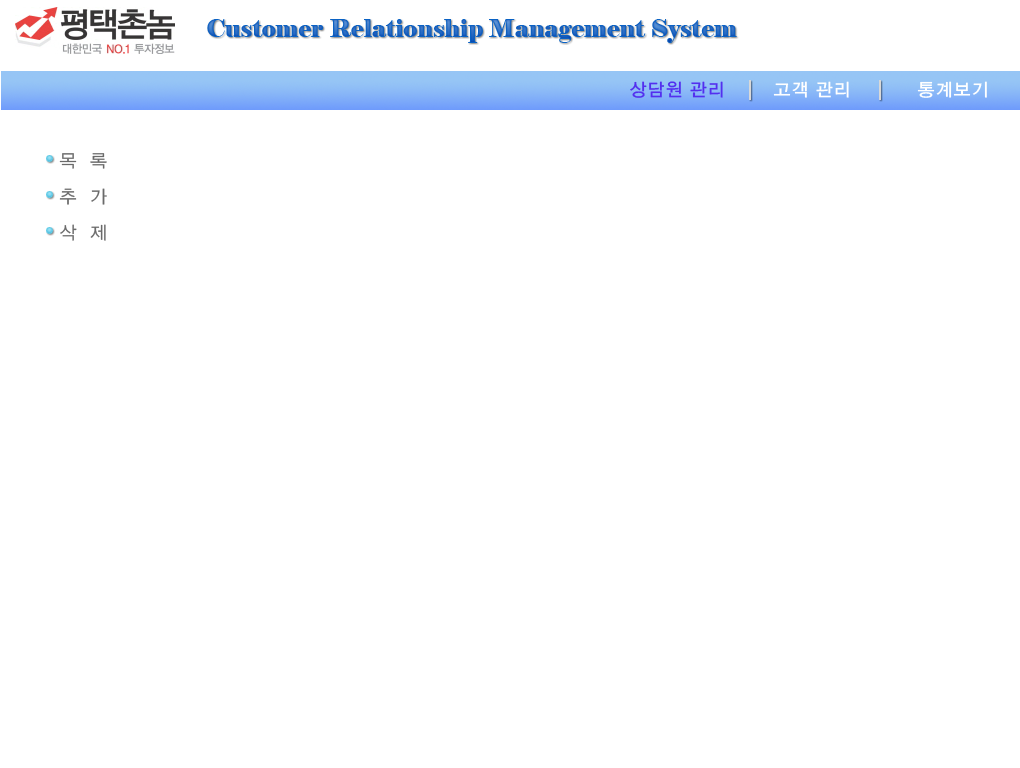
<style>
.page{position:relative;width:1020px;height:768px;background:#ffffff}
.page>*{position:absolute;margin:0}
.t1{font:24px "Elephant-Regular";color:#1762c2}
.t2{font:18px "YGO135";color:#ffffff}
.t3{font:18px "YGO135";color:#532fef}
.t4{font:18px/18px "YGO125";color:#6a6a6a}
</style>
<div class="page">
<p class="t1" style="left:207px;top:19px;width:530px;height:24px">Customer Relationship Management System</p>
<p class="t2" style="left:630px;top:81px;width:357px;height:17px"><span class="t3">상담원 관리</span>  고객 관리  통계보기</p>
<p class="t4" style="left:59px;top:153px;width:48px;height:88px">목  록<br><br>추  가<br><br>삭  제</p>
</div>
